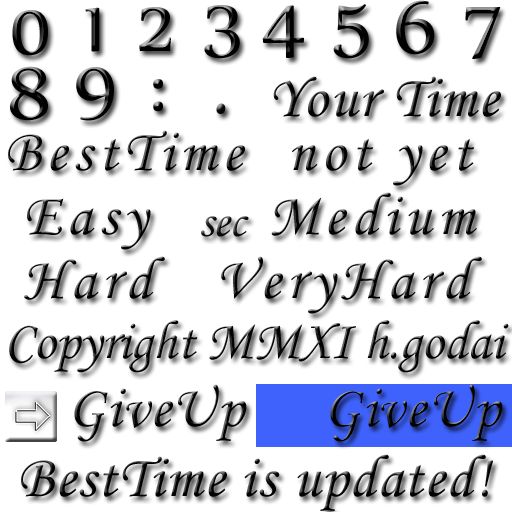
<style>
.page{position:relative;width:512px;height:512px;background:#ffffff}
.page>*{position:absolute;margin:0}
.t1{font:60px "MonotypeCorsiva";letter-spacing:0.025em;color:#020202}
.t2{font:90px "MonotypeCorsiva";color:#0f0e0e}
.t3{font:60px/64px "MonotypeCorsiva";letter-spacing:0.1em;color:#020202}
.t4{font:55px/60px "MonotypeCorsiva";color:#020202}
.t5{font:60px/60px "MonotypeCorsiva";letter-spacing:0.025em;color:#020202}
.t6{font:48px "MonotypeCorsiva";color:#0f0e0e}
</style>
<div class="page">
<p class="t1" style="left:273px;top:76px;width:228px;height:41px">Your Time</p>
<p class="t2" style="left:216px;top:103px;width:10px;height:11px">.</p>
<p class="t3" style="left:8px;top:130px;width:501px;height:312px">BestTime  not yet<br> Easy      Medium<br> Hard   VeryHard<br><span class="t4">Copyright MMXI h.godai<br>  </span><span class="t5">GiveUp   GiveUp</span></p>
<p class="t6" style="left:201px;top:216px;width:48px;height:21px"><span class="t2">  </span>sec</p>
<p class="t1" style="left:21px;top:454px;width:472px;height:57px">BestTime is updated!</p>
</div>
